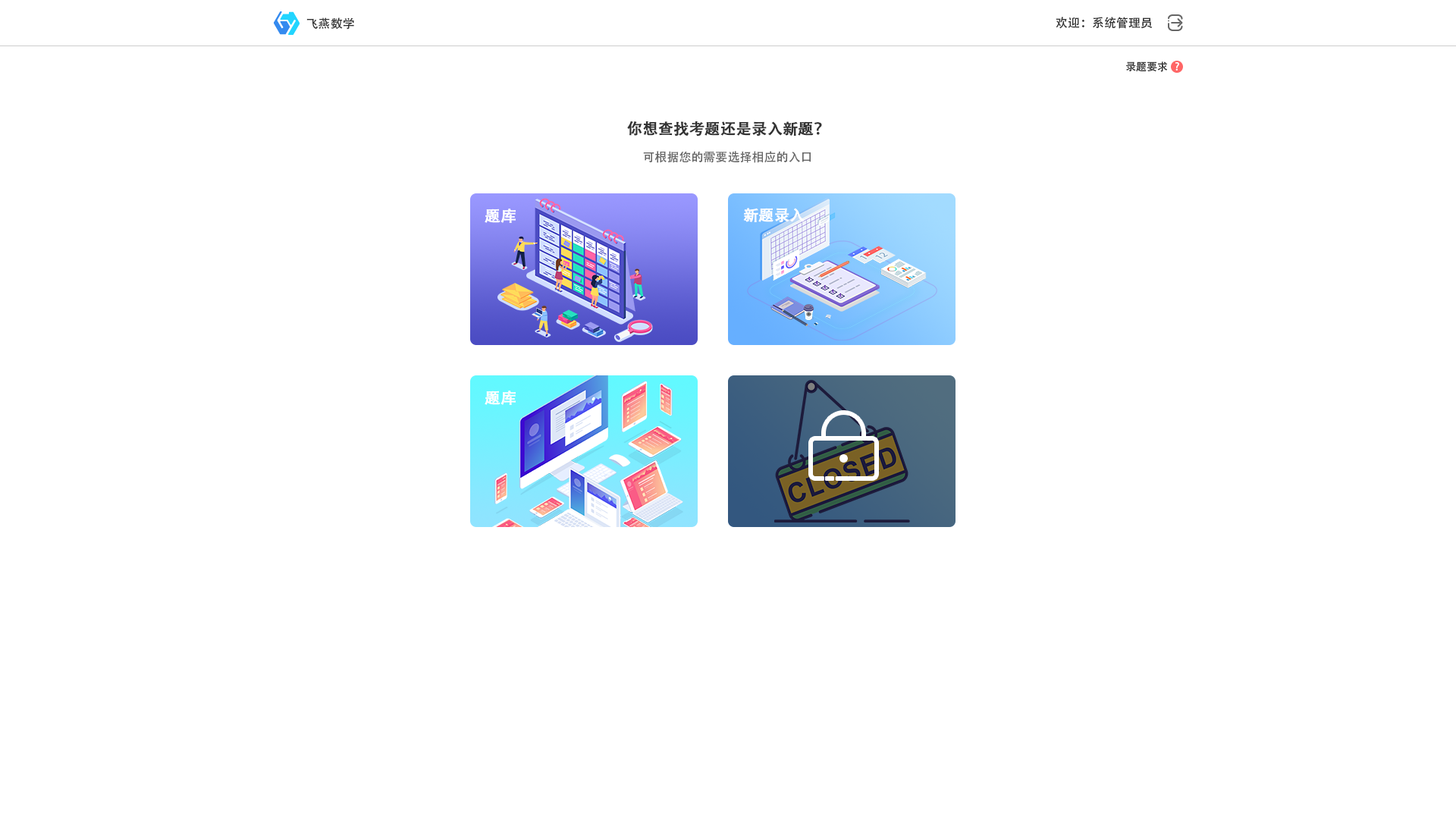
<style>
.page{position:relative;width:1456px;height:819px;background:#ffffff}
.page>*{position:absolute;margin:0}
.t1{font:12.1px "AdobeHeitiStd-Regular";color:#333333}
.t2{font:10.6px "AdobeHeitiStd-Regular";color:#333333}
.t3{font:10.6px "AdobeHeitiStd-Regular";color:#ffffff}
.t4{font:15.2px "AdobeHeitiStd-Regular";color:#333333;font-weight:bold}
.t5{font:12.1px "AdobeHeitiStd-Regular";color:#666666}
.t6{font:15.2px "AdobeHeitiStd-Regular";color:#ffffff;font-weight:bold}
</style>
<div class="page">
<p class="t1" style="left:306px;top:17px;width:48px;height:13px">飞燕数学</p>
<p class="t1" style="left:1056px;top:17px;width:97px;height:12px">欢迎：系统管理员</p>
<p class="t2" style="left:1126px;top:61px;width:41px;height:11px">录题要求</p>
<p class="t3" style="left:1175px;top:62px;width:4px;height:9px">?</p>
<p class="t4" style="left:627px;top:121px;width:195px;height:15px">你想查找考题还是录入新题？</p>
<p class="t5" style="left:643px;top:151px;width:168px;height:12px">可根据您的需要选择相应的入口</p>
<p class="t6" style="left:485px;top:209px;width:31px;height:14px">题库</p>
<p class="t6" style="left:743px;top:208px;width:62px;height:15px">新题录入</p>
<p class="t6" style="left:485px;top:391px;width:31px;height:14px">题库</p>
</div>
